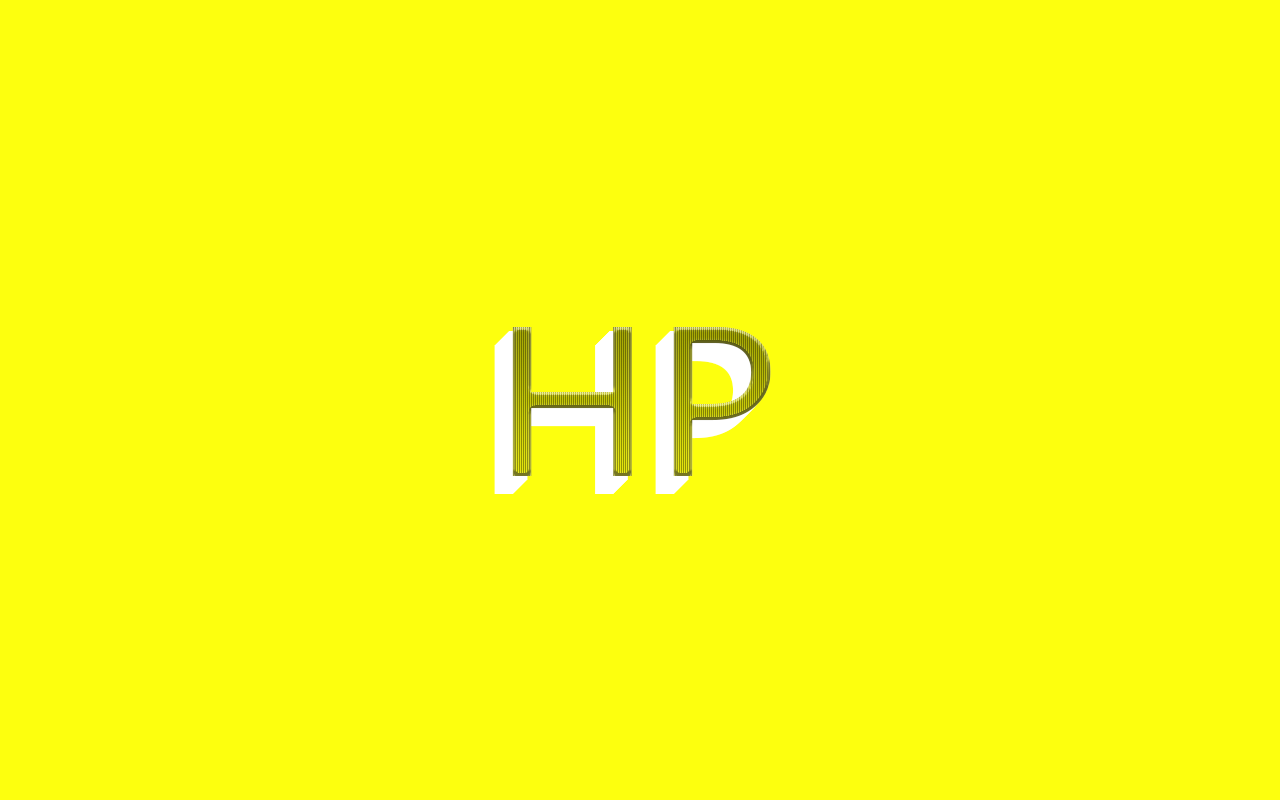
<style>
.page{position:relative;width:1280px;height:800px;background:#fdff0e}
.page>*{position:absolute;margin:0}
.t1{font:212.6px "SegoeUI";scale:1.06 1}
.t2{font:212.6px "SegoeUI";color:#ffffff;scale:1.06 1}
</style>
<div class="page">
<p class="t1" style="left:512px;top:327px;width:259px;height:149px">HP</p>
<p class="t2" style="left:497px;top:342px;width:259px;height:149px">HP</p>
<p class="t2" style="left:498px;top:341px;width:259px;height:149px">HP</p>
<p class="t2" style="left:499px;top:340px;width:259px;height:149px">HP</p>
<p class="t2" style="left:500px;top:339px;width:259px;height:149px">HP</p>
<p class="t1" style="left:501px;top:338px;width:259px;height:149px">HP</p>
<p class="t1" style="left:502px;top:337px;width:259px;height:149px">HP</p>
<p class="t1" style="left:504px;top:335px;width:259px;height:149px">HP</p>
<p class="t1" style="left:505px;top:334px;width:259px;height:149px">HP</p>
<p class="t1" style="left:506px;top:333px;width:259px;height:149px">HP</p>
<p class="t1" style="left:507px;top:332px;width:259px;height:149px">HP</p>
<p class="t1" style="left:508px;top:331px;width:259px;height:149px">HP</p>
<p class="t2" style="left:494px;top:345px;width:259px;height:149px">HP</p>
<p class="t2" style="left:495px;top:344px;width:259px;height:149px">HP</p>
<p class="t2" style="left:496px;top:343px;width:259px;height:149px">HP</p>
</div>
